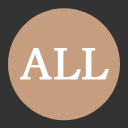
<style>
.page{position:relative;width:128px;height:128px;background:#c79d7f}
.page>*{position:absolute;margin:0}
.t1{font:45px "BookmanOldStyle";color:#ffffff;font-weight:bold}
</style>
<div class="page">
<p class="t1" style="left:20px;top:48px;width:89px;height:32px">ALL</p>
</div>
